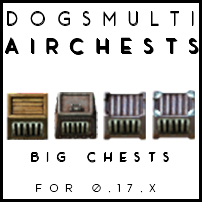
<style>
.page{position:relative;width:202px;height:202px;background:#ffffff}
.page>*{position:absolute;margin:0}
.t1{font:20.1px "AceSansDemo";letter-spacing:0.58em;color:#000000}
.t2{font:21.1px "AceSansDemo";letter-spacing:0.58em;color:#000000}
.t3{font:13.5px "AceSansDemo";letter-spacing:0.58em;color:#000000}
.t4{font:12px "AceSansDemo";letter-spacing:0.58em;color:#000000}
</style>
<div class="page">
<p class="t1" style="left:7px;top:11px;width:187px;height:14px">DOGSMULTI</p>
<p class="t1" style="left:7px;top:12px;width:187px;height:14px">DOGSMULTI</p>
<p class="t2" style="left:5px;top:37px;width:192px;height:16px">AIRCHESTS</p>
<p class="t2" style="left:5px;top:38px;width:192px;height:16px">AIRCHESTS</p>
<p class="t2" style="left:5px;top:38px;width:192px;height:16px">AIRCHESTS</p>
<p class="t2" style="left:6px;top:38px;width:192px;height:16px">AIRCHESTS</p>
<p class="t2" style="left:6px;top:39px;width:192px;height:16px">AIRCHESTS</p>
<p class="t2" style="left:6px;top:39px;width:192px;height:16px">AIRCHESTS</p>
<p class="t2" style="left:6px;top:39px;width:192px;height:16px">AIRCHESTS</p>
<p class="t2" style="left:7px;top:39px;width:192px;height:16px">AIRCHESTS</p>
<p class="t3" style="left:31px;top:153px;width:138px;height:10px">BIG CHESTS</p>
<p class="t3" style="left:31px;top:152px;width:138px;height:10px">BIG CHESTS</p>
<p class="t3" style="left:31px;top:152px;width:138px;height:10px">BIG CHESTS</p>
<p class="t4" style="left:36px;top:184px;width:120px;height:9px">FOR 0.17.X</p>
</div>
